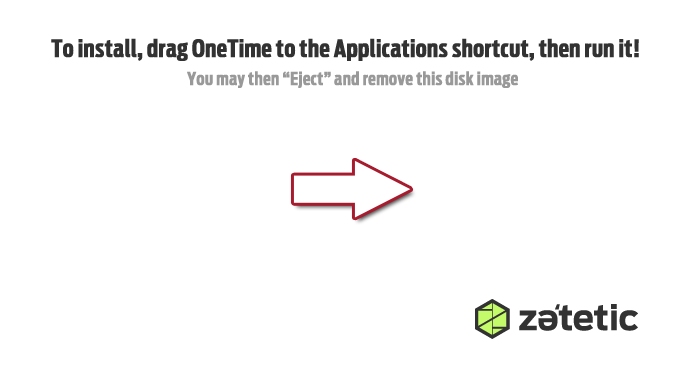
<style>
.page{position:relative;width:700px;height:367px;background:#ffffff}
.page>*{position:absolute;margin:0}
.t1{font:24px "AntennaExtraCond-Bold";color:#323232;font-weight:bold}
.t2{font:18px "AntennaExtraCond-Bold";color:#999999;font-weight:bold}
</style>
<div class="page">
<p class="t1" style="left:51px;top:38px;width:588px;height:23px">To install, drag OneTime to the Applications shortcut, then run it!</p>
<p class="t2" style="left:187px;top:71px;width:331px;height:17px">You may then “Eject” and remove this disk image</p>
</div>
